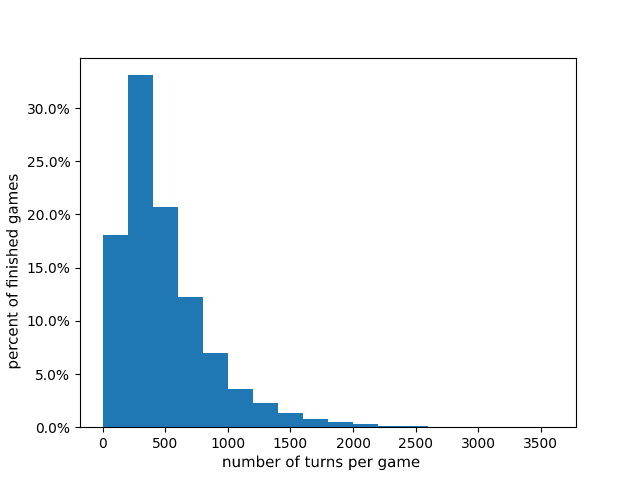
<style>
.page{position:relative;width:640px;height:480px;background:#ffffff}
.page>*{position:absolute;margin:0}
.t1{font:15px "DejaVuSans";color:#000000}
</style>
<div class="page">
<p class="t1" style="left:6px;top:174px;width:15px;height:195px;rotate:-90deg">percent of finished games</p>
<p class="t1" style="left:223px;top:455px;width:197px;height:16px">number of turns per game</p>
</div>
